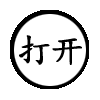
<style>
.page{position:relative;width:100px;height:100px;background:#ffffff}
.page>*{position:absolute;margin:0}
.t1{font:33.3px "KaiTi";letter-spacing:-0.05em;color:#000000;text-transform:uppercase;font-weight:bold}
</style>
<div class="page">
<p class="t1" style="left:19px;top:35px;width:63px;height:30px">打开</p>
</div>
